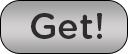
<style>
.page{position:relative;width:128px;height:54px}
.page>*{position:absolute;margin:0}
.t1{font:36px "GothamRounded-Medium";color:#2d2d2d}
</style>
<div class="page">
<p class="t1" style="left:31px;top:13px;width:71px;height:26px">Get!</p>
</div>
